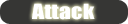
<style>
.page{position:relative;width:128px;height:24px;background:#363634}
.page>*{position:absolute;margin:0}
.t1{font:19.2px "Impact";color:#ffffff;scale:1.25 1}
</style>
<div class="page">
<p class="t1" style="left:32px;top:3px;width:63px;height:17px">Attack</p>
</div>
